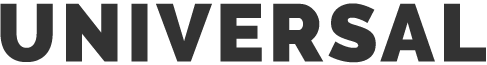
<style>
.page{position:relative;width:487px;height:65px;background:#ffffff}
.page>*{position:absolute;margin:0}
.t1{font:81px "Raleway-Black";letter-spacing:0.055em;color:#333333;text-transform:uppercase}
</style>
<div class="page">
<p class="t1" style="left:0px;top:3px;width:486px;height:60px">universal</p>
</div>
